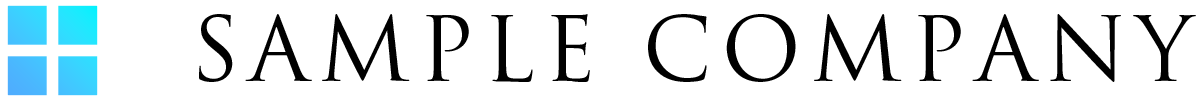
<style>
.page{position:relative;width:1200px;height:100px;background:#ffffff}
.page>*{position:absolute;margin:0}
.t1{font:87.5px "TrajanPro3-Regular";letter-spacing:0.1em;color:#000000}
</style>
<div class="page">
<p class="t1" style="left:199px;top:14px;width:997px;height:68px">SAMPLE COMPANY</p>
</div>
